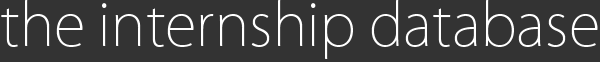
<style>
.page{position:relative;width:600px;height:62px;background:#333333}
.page>*{position:absolute;margin:0}
.t1{font:58px "KozGoPro-ExtraLight";color:#ffffff}
</style>
<div class="page">
<p class="t1" style="left:1px;top:0px;width:597px;height:59px">the internship database</p>
</div>
